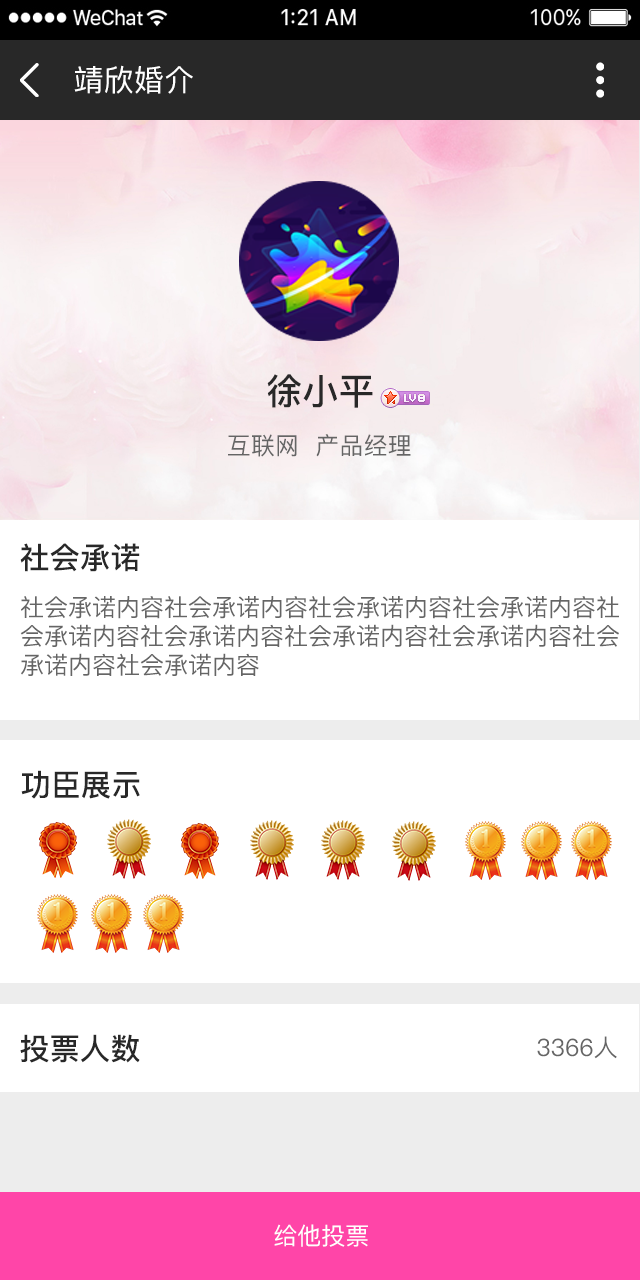
<style>
.page{position:relative;width:640px;height:1280px;background:#ffffff}
.page>*{position:absolute;margin:0}
.t1{font:30px "PingFang-SC-Medium";letter-spacing:0.01em;color:#ffffff;text-transform:uppercase}
.t2{font:36px "PingFang-SC-Bold";letter-spacing:0.01em;color:#282828;text-transform:uppercase}
.t3{font:24px "PingFang-SC-Medium";letter-spacing:0.01em;color:#656565;text-transform:uppercase}
.t4{font:30px "PingFang-SC-Bold";letter-spacing:0.01em;color:#282828;text-transform:uppercase}
.t5{font:24px "PingFang-SC-Medium";color:#656565;text-transform:uppercase}
.t6{font:24px "PingFang-SC-Medium";color:#ffffff;text-transform:uppercase}
</style>
<div class="page">
<p class="t1" style="left:74px;top:65px;width:119px;height:29px">靖欣婚介</p>
<p class="t2" style="left:267px;top:374px;width:106px;height:34px">徐小平</p>
<p class="t3" style="left:228px;top:434px;width:183px;height:23px">互联网  产品经理</p>
<p class="t4" style="left:20px;top:543px;width:120px;height:29px">社会承诺</p>
<p class="t5" style="left:20px;top:596px;width:599px;height:80px">社会承诺内容社会承诺内容社会承诺内容社会承诺内容社会承诺内容社会承诺内容社会承诺内容社会承诺内容社会承诺内容社会承诺内容</p>
<p class="t4" style="left:21px;top:770px;width:119px;height:29px">功臣展示</p>
<p class="t4" style="left:20px;top:1034px;width:120px;height:29px">投票人数</p>
<p class="t5" style="left:537px;top:1036px;width:80px;height:23px">3366人</p>
<p class="t6" style="left:274px;top:1224px;width:94px;height:23px">给他投票</p>
</div>
